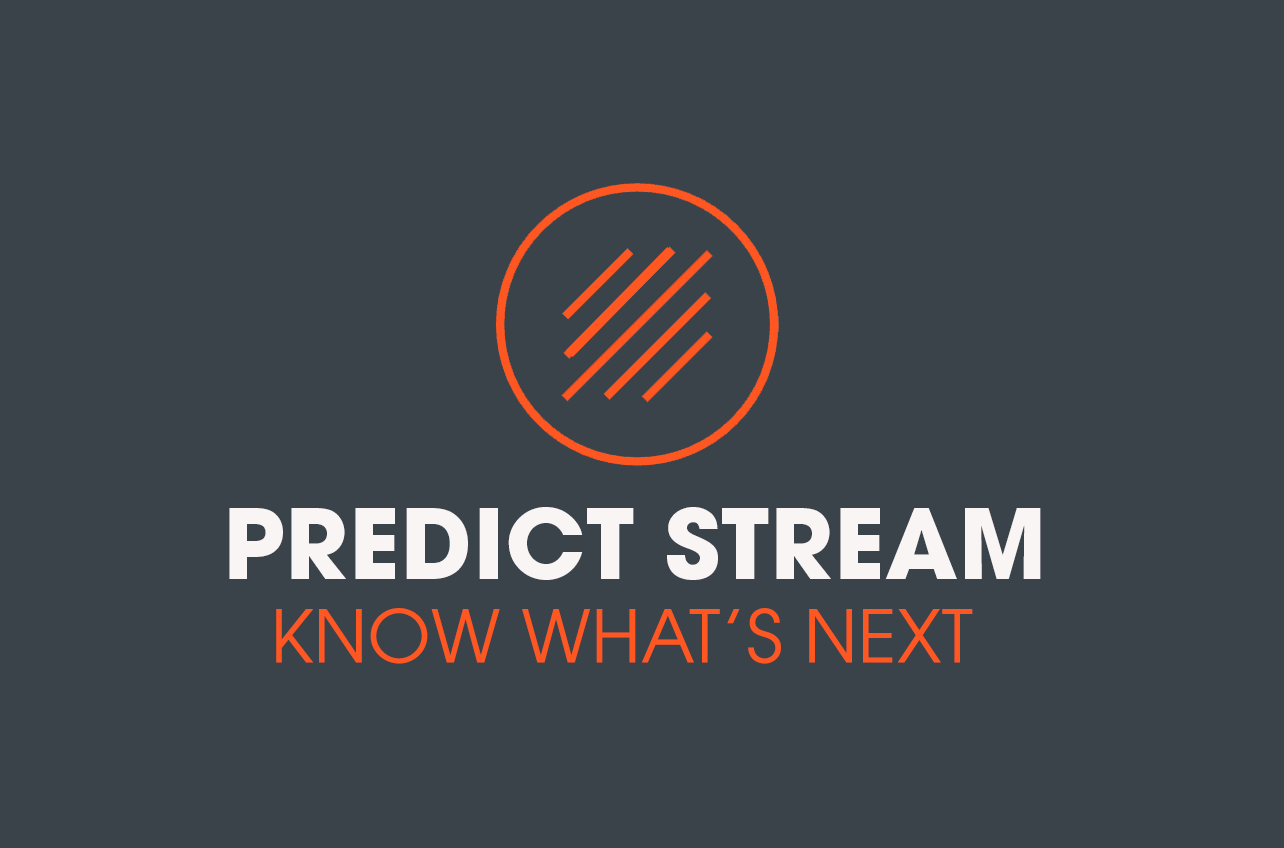
<style>
.page{position:relative;width:1284px;height:848px;background:#3a424a}
.page>*{position:absolute;margin:0}
.t1{font:96px "ITCAvantGardePro-Bold";letter-spacing:0.01em;color:#faf5f5}
.t2{font:72px "ITCAvantGardePro-Bk";letter-spacing:0.01em;color:#ff5722}
</style>
<div class="page">
<p class="t1" style="left:229px;top:507px;width:812px;height:73px">PREDICT STREAM</p>
<p class="t2" style="left:276px;top:608px;width:697px;height:56px">KNOW WHAT’S NEXT</p>
</div>
